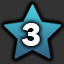
<style>
.page{position:relative;width:64px;height:64px;background:#333333}
.page>*{position:absolute;margin:0}
.t1{font:32px "AvenirNext-Bold";letter-spacing:0.08em;color:#ffffff}
</style>
<div class="page">
<p class="t1" style="left:22px;top:23px;width:18px;height:23px">3</p>
</div>
